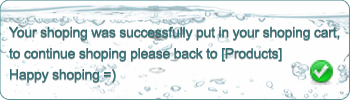
<style>
.page{position:relative;width:350px;height:100px;background:#fffefe}
.page>*{position:absolute;margin:0}
.t1{font:14px/21.1px "ArialMT";letter-spacing:-0.015em;color:#367075}
</style>
<div class="page">
<p class="t1" style="left:9px;top:26px;width:331px;height:57px">Your shoping was successfully put in your shoping cart,<br>to continue shoping please back to [Products]<br>Happy shoping =)</p>
</div>
